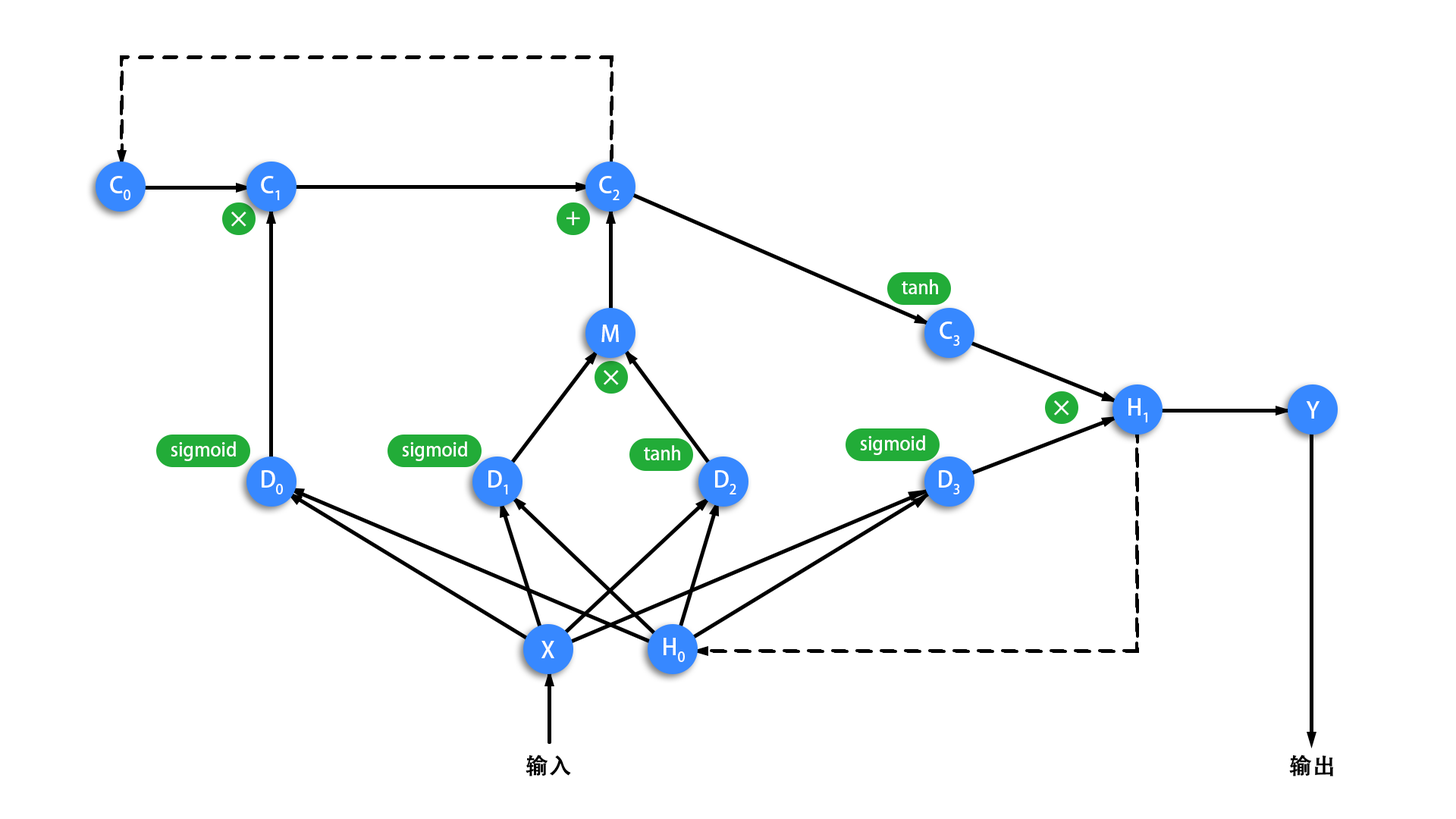
<style>
.page{position:relative;width:1456px;height:819px;background:#ffffff}
.page>*{position:absolute;margin:0}
.t1{font:22.7px "AdobeHeitiStd-Regular";color:#ffffff}
.t2{font:18.2px "AdobeHeitiStd-Regular";color:#ffffff}
.t3{font:22.7px "AdobeHeitiStd-Regular";color:#000000;font-weight:bold}
</style>
<div class="page">
<p class="t1" style="left:110px;top:176px;width:20px;height:24px">C0</p>
<p class="t1" style="left:261px;top:176px;width:19px;height:24px">C1</p>
<p class="t1" style="left:599px;top:176px;width:21px;height:24px">C2</p>
<p class="t1" style="left:231px;top:212px;width:15px;height:15px">×</p>
<p class="t1" style="left:566px;top:212px;width:14px;height:13px">+</p>
<p class="t2" style="left:902px;top:279px;width:36px;height:15px">tanh</p>
<p class="t1" style="left:601px;top:325px;width:18px;height:17px">M</p>
<p class="t1" style="left:940px;top:322px;width:20px;height:24px">C3</p>
<p class="t1" style="left:604px;top:370px;width:15px;height:15px">×</p>
<p class="t1" style="left:1054px;top:400px;width:15px;height:16px">×</p>
<p class="t1" style="left:1128px;top:398px;width:19px;height:24px">H1</p>
<p class="t1" style="left:1306px;top:401px;width:13px;height:18px">Y</p>
<p class="t2" style="left:860px;top:435px;width:65px;height:20px">sigmoid</p>
<p class="t2" style="left:171px;top:441px;width:65px;height:20px">sigmoid</p>
<p class="t2" style="left:402px;top:441px;width:65px;height:20px">sigmoid</p>
<p class="t2" style="left:644px;top:445px;width:36px;height:15px">tanh</p>
<p class="t1" style="left:262px;top:470px;width:21px;height:24px">D0</p>
<p class="t1" style="left:488px;top:470px;width:20px;height:24px">D1</p>
<p class="t1" style="left:715px;top:470px;width:21px;height:24px">D2</p>
<p class="t1" style="left:939px;top:470px;width:21px;height:24px">D3</p>
<p class="t1" style="left:541px;top:641px;width:13px;height:17px">X</p>
<p class="t1" style="left:664px;top:638px;width:21px;height:24px">H0</p>
<p class="t3" style="left:526px;top:755px;width:45px;height:22px">输入</p>
<p class="t3" style="left:1289px;top:755px;width:45px;height:22px">输出</p>
</div>
